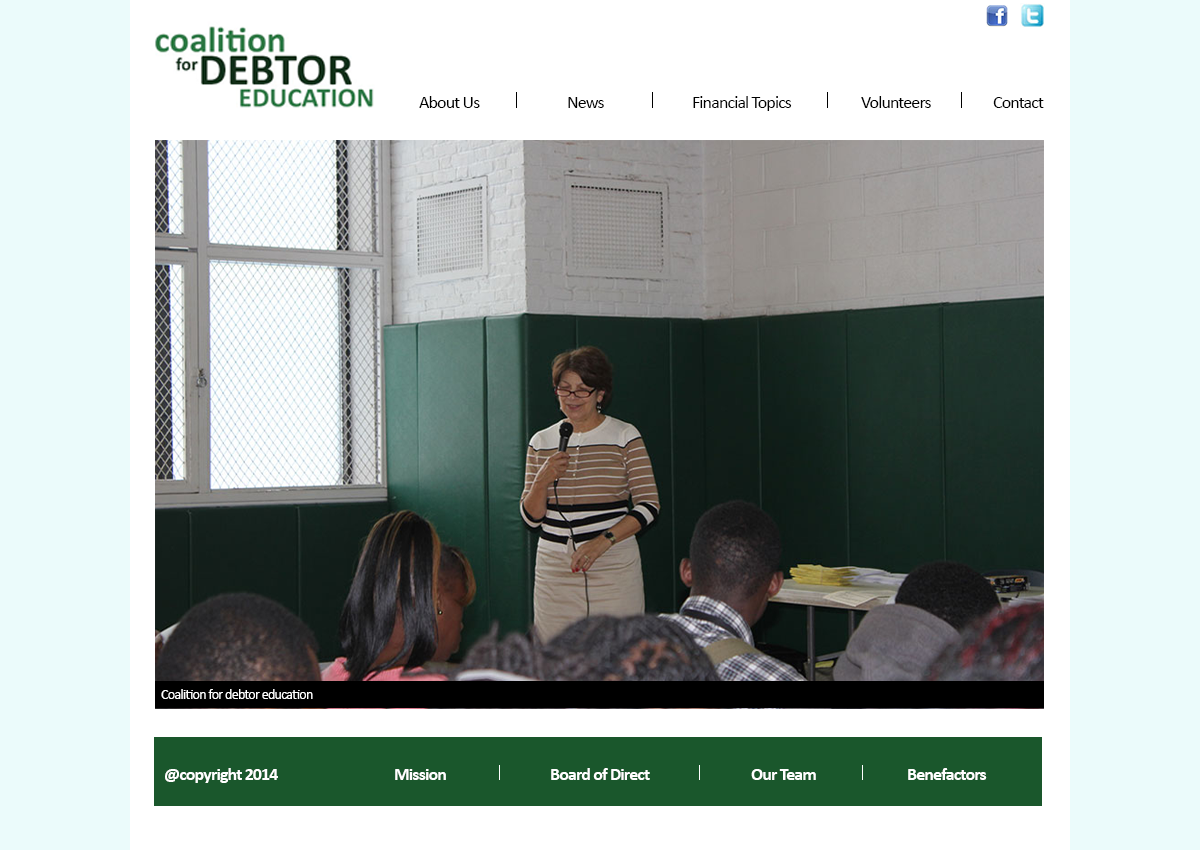
<style>
.page{position:relative;width:1200px;height:850px;background:#ebfbfb}
.page>*{position:absolute;margin:0}
.t1{font:18px "Calibri";letter-spacing:-0.05em;color:#000000}
.t2{font:14px "Calibri";letter-spacing:-0.05em;color:#ffffff}
.t3{font:18px "Calibri-Bold";letter-spacing:-0.05em;color:#ffffff}
</style>
<div class="page">
<p class="t1" style="left:419px;top:96px;width:61px;height:12px">About Us</p>
<p class="t1" style="left:568px;top:97px;width:36px;height:11px">News</p>
<p class="t1" style="left:693px;top:96px;width:99px;height:15px">Financial Topics</p>
<p class="t1" style="left:861px;top:96px;width:70px;height:12px">Volunteers</p>
<p class="t1" style="left:993px;top:97px;width:51px;height:11px">Contact</p>
<p class="t2" style="left:161px;top:689px;width:152px;height:10px">Coalition for debtor education</p>
<p class="t3" style="left:165px;top:768px;width:113px;height:15px">@copyright 2014</p>
<p class="t3" style="left:395px;top:769px;width:51px;height:11px">Mission</p>
<p class="t3" style="left:551px;top:768px;width:99px;height:12px">Board of Direct</p>
<p class="t3" style="left:751px;top:769px;width:65px;height:11px">Our Team</p>
<p class="t3" style="left:908px;top:768px;width:79px;height:12px">Benefactors</p>
</div>
